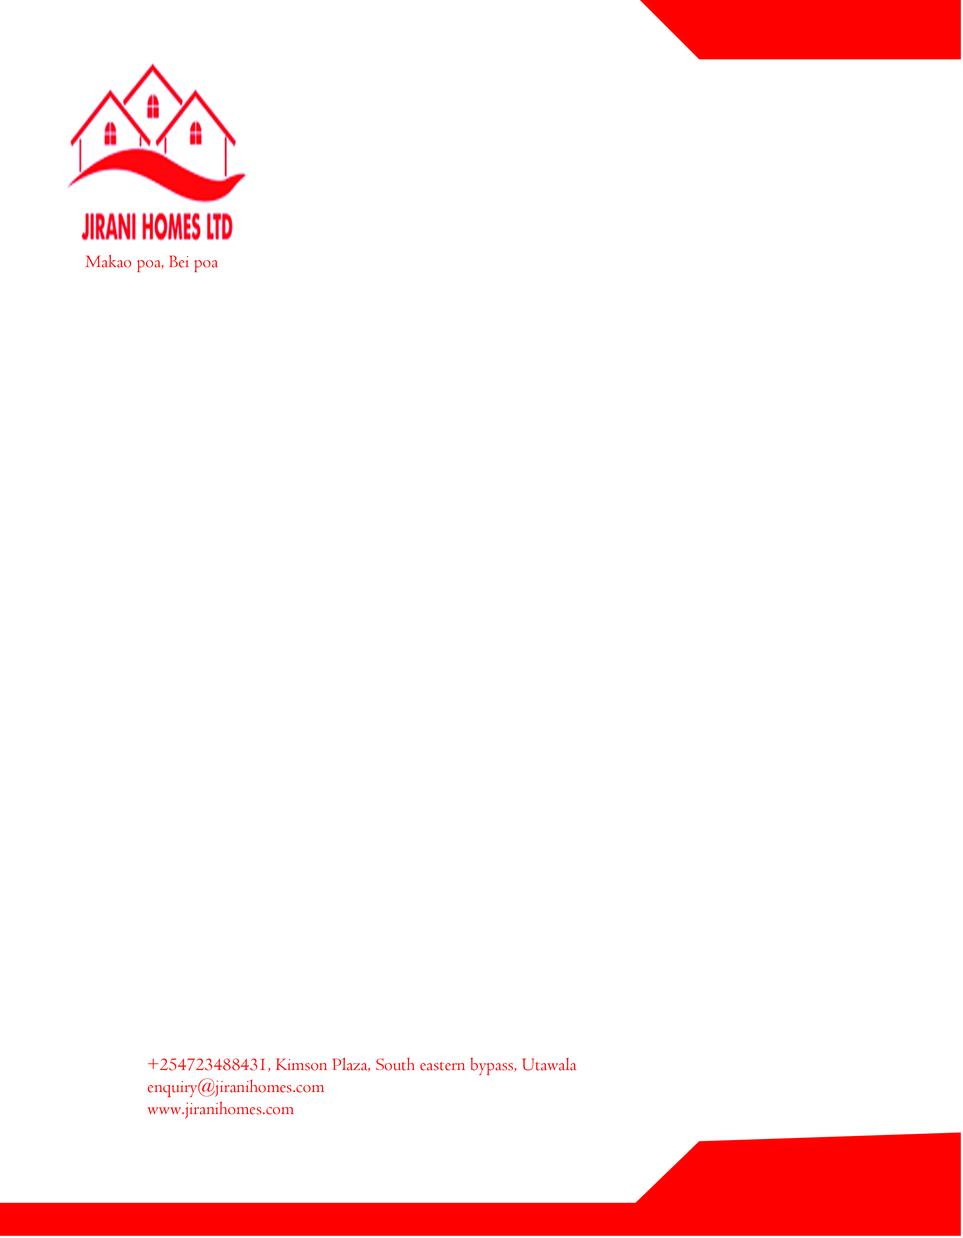
<style>
.page{position:relative;width:963px;height:1238px;background:#ffffff}
.page>*{position:absolute;margin:0}
.t1{font:18.3px "Centaur";color:#ff0000}
</style>
<div class="page">
<p class="t1" style="left:85px;top:255px;width:133px;height:17px">Makao poa, Bei poa</p>
<p class="t1" style="left:147px;top:1058px;width:430px;height:61px">+254723488431, Kimson Plaza, South eastern bypass, Utawala<br>enquiry@jiranihomes.com<br>www.jiranihomes.com</p>
</div>
